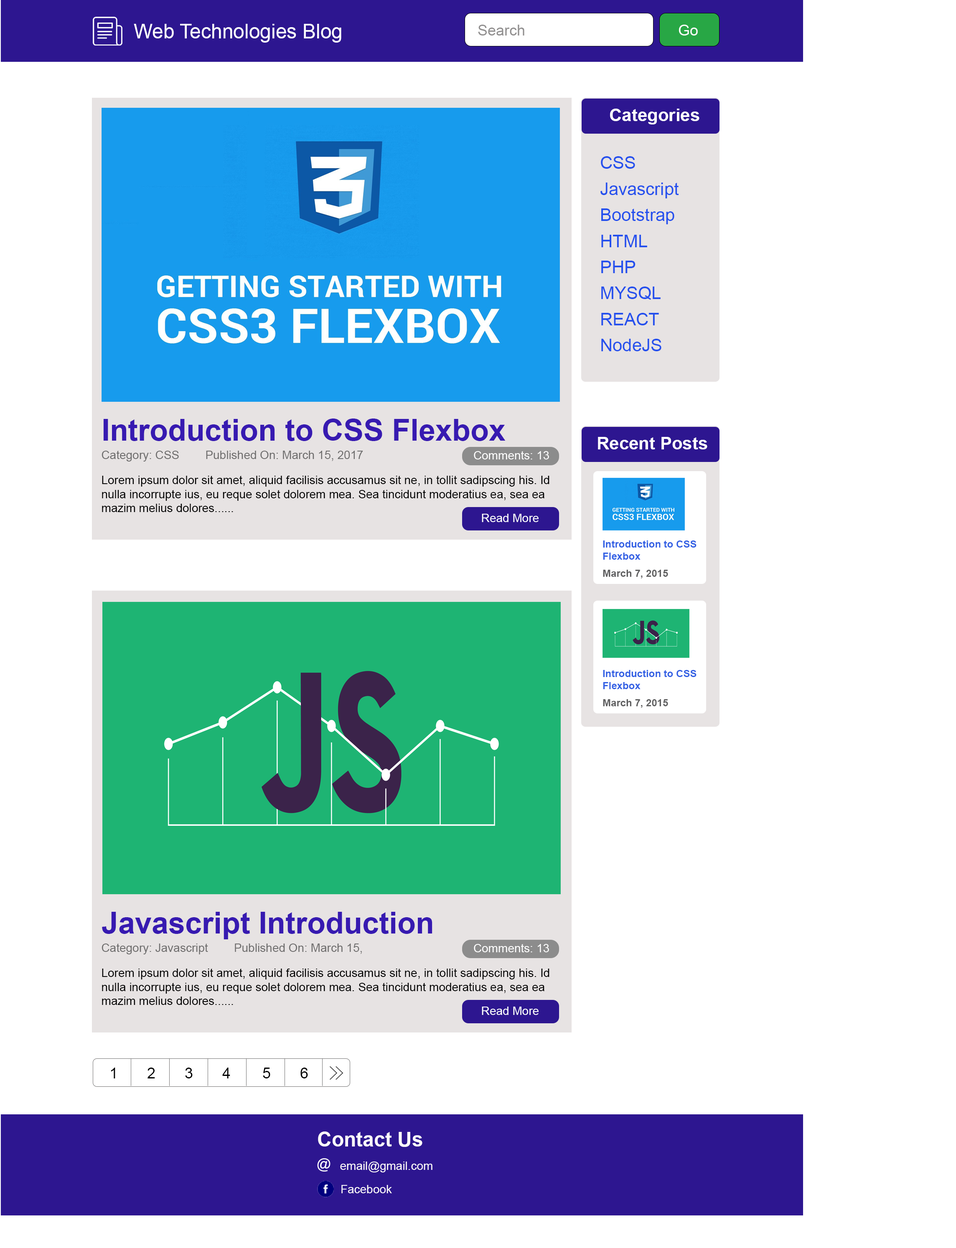
<style>
.page{position:relative;width:956px;height:1248px;background:#ffffff}
.page>*{position:absolute;margin:0}
.t1{font:20px "ArialMT";color:#ffffff}
.t2{font:15px "ArialMT";color:#918f8f}
.t3{font:15px "ArialMT";color:#ffffff}
.t4{font:17.5px "Arial-BoldMT";color:#ffffff}
.t5{font:17.5px "ArialMT";color:#2550ed}
.t6{font:30.1px "Arial-BoldMT";color:#371ab1}
.t7{font:11.7px "ArialMT";color:#6e6d6d}
.t8{font:11.7px "ArialMT";color:#ffffff}
.t9{font:11.7px "ArialMT";color:#000000}
.t10{font:10px "Arial-BoldMT";color:#3461e4}
.t11{font:10px "Arial-BoldMT";color:#606061}
.t12{font:15px "ArialMT";color:#000000}
.t13{font:11.7px "ArialMT";color:#fffbfb}
.t14{font:20px "Arial-BoldMT";color:#fffbfb}
</style>
<div class="page">
<p class="t1" style="left:134px;top:24px;width:207px;height:19px">Web Technologies Blog</p>
<p class="t2" style="left:478px;top:25px;width:46px;height:10px">Search</p>
<p class="t3" style="left:678px;top:25px;width:19px;height:10px">Go</p>
<p class="t4" style="left:610px;top:109px;width:89px;height:15px">Categories</p>
<p class="t5" style="left:600px;top:156px;width:79px;height:195px">CSS<br><br>Javascript<br><br>Bootstrap<br><br>HTML<br><br>PHP<br><br>MYSQL<br><br>REACT<br><br>NodeJS</p>
<p class="t6" style="left:103px;top:418px;width:402px;height:23px">Introduction to CSS Flexbox</p>
<p class="t4" style="left:598px;top:437px;width:109px;height:12px">Recent Posts</p>
<p class="t7" style="left:101px;top:451px;width:262px;height:10px">Category: CSS        Published On: March 15, 2017</p>
<p class="t8" style="left:474px;top:451px;width:75px;height:8px">Comments: 13</p>
<p class="t9" style="left:102px;top:476px;width:447px;height:36px">Lorem ipsum dolor sit amet, aliquid facilisis accusamus sit ne, in tollit sadipscing his. Id nulla incorrupte ius, eu reque solet dolorem mea. Sea tincidunt moderatius ea, sea ea mazim melius dolores......</p>
<p class="t8" style="left:482px;top:514px;width:56px;height:8px">Read More</p>
<p class="t10" style="left:603px;top:540px;width:93px;height:38px">Introduction to CSS <br>Flexbox<br><br><span class="t11">March 7, 2015</span></p>
<p class="t10" style="left:603px;top:670px;width:93px;height:38px">Introduction to CSS <br>Flexbox<br><br><span class="t11">March 7, 2015</span></p>
<p class="t6" style="left:102px;top:912px;width:330px;height:27px">Javascript Introduction</p>
<p class="t7" style="left:101px;top:943px;width:261px;height:11px">Category: Javascript        Published On: March 15, 2017</p>
<p class="t8" style="left:474px;top:944px;width:75px;height:8px">Comments: 13</p>
<p class="t9" style="left:102px;top:968px;width:447px;height:37px">Lorem ipsum dolor sit amet, aliquid facilisis accusamus sit ne, in tollit sadipscing his. Id nulla incorrupte ius, eu reque solet dolorem mea. Sea tincidunt moderatius ea, sea ea mazim melius dolores......</p>
<p class="t8" style="left:482px;top:1007px;width:56px;height:8px">Read More</p>
<p class="t12" style="left:111px;top:1067px;width:4px;height:11px">1</p>
<p class="t12" style="left:147px;top:1067px;width:8px;height:11px">2</p>
<p class="t12" style="left:185px;top:1067px;width:8px;height:11px">3</p>
<p class="t12" style="left:222px;top:1067px;width:8px;height:11px">4</p>
<p class="t12" style="left:263px;top:1067px;width:7px;height:11px">5</p>
<p class="t12" style="left:300px;top:1067px;width:8px;height:11px">6</p>
<p class="t13" style="left:318px;top:1131px;width:114px;height:41px"><span class="t14">Contact Us<br><br><br><br></span>       email@gmail.com</p>
<p class="t13" style="left:341px;top:1185px;width:51px;height:8px">Facebook</p>
</div>
